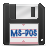
<style>
.page{position:relative;width:48px;height:48px;background:#ffffff}
.page>*{position:absolute;margin:0}
.t1{font:7.8px "MarkerFelt-Thin";letter-spacing:0.02em;color:#134c95}
</style>
<div class="page">
<p class="t1" style="left:10px;top:29px;width:27px;height:8px">MS-DOS</p>
</div>
